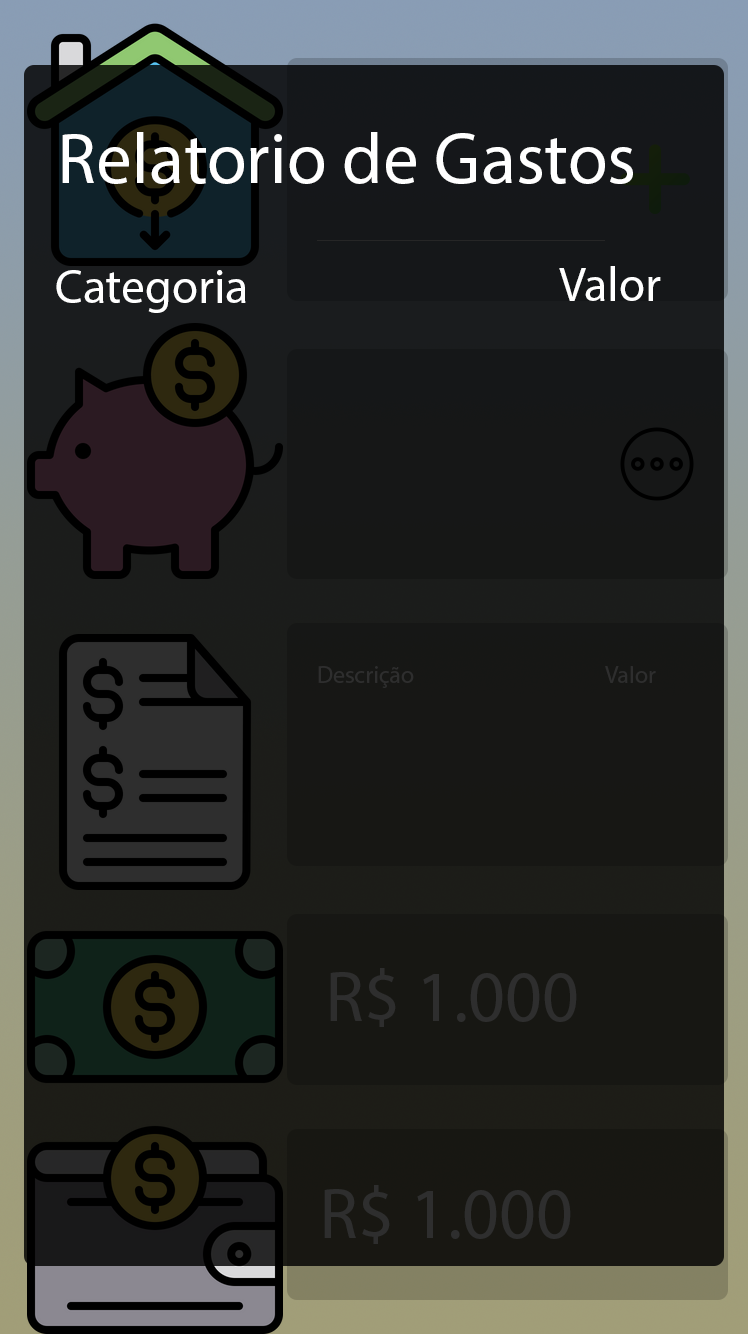
<style>
.page{position:relative;width:750px;height:1334px}
.page>*{position:absolute;margin:0}
.t1{font:72px "MyriadPro-Regular";color:#ffffff}
.t2{font:48px "MyriadPro-Regular";color:#ffffff}
.t3{font:24px "MyriadPro-Regular";color:#2e2e2e}
.t4{font:72px "MyriadPro-Regular";color:#2e2e2e}
</style>
<div class="page">
<p class="t1" style="left:62px;top:132px;width:571px;height:52px">Relatorio de Gastos</p>
<p class="t2" style="left:56px;top:270px;width:190px;height:43px">Categoria</p>
<p class="t2" style="left:559px;top:266px;width:102px;height:35px">Valor</p>
<p class="t3" style="left:318px;top:666px;width:96px;height:22px">Descrição</p>
<p class="t3" style="left:605px;top:666px;width:51px;height:17px">Valor</p>
<p class="t4" style="left:330px;top:968px;width:247px;height:59px">R$ 1.000</p>
<p class="t4" style="left:324px;top:1185px;width:247px;height:59px">R$ 1.000</p>
</div>
